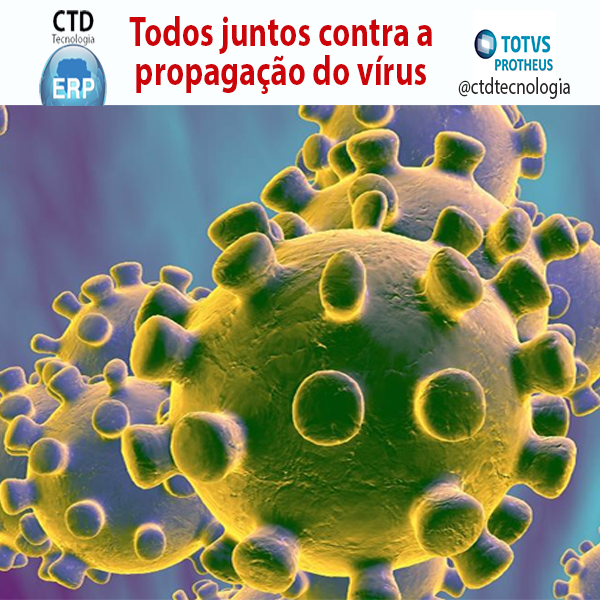
<style>
.page{position:relative;width:600px;height:600px}
.page>*{position:absolute;margin:0}
.t1{font:42.3px/39px "MyriadPro-Bold";letter-spacing:0.005em;color:#cb0409;scale:0.75 1}
.t2{font:22.8px "MyriadPro-Regular";letter-spacing:0.005em;color:#262423;scale:0.75 1}
</style>
<div class="page">
<p class="t1" style="left:129px;top:16px;width:303px;height:78px;text-align:center">Todos juntos contra a<br>propagação do vírus</p>
<p class="t2" style="left:458px;top:77px;width:112px;height:22px">@ctdtecnologia</p>
</div>
